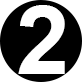
<style>
.page{position:relative;width:82px;height:82px;background:#000000}
.page>*{position:absolute;margin:0}
.t1{font:95.8px "Arial-BoldMT";color:#ffffff}
</style>
<div class="page">
<p class="t1" style="left:18px;top:5px;width:47px;height:69px">2</p>
</div>
